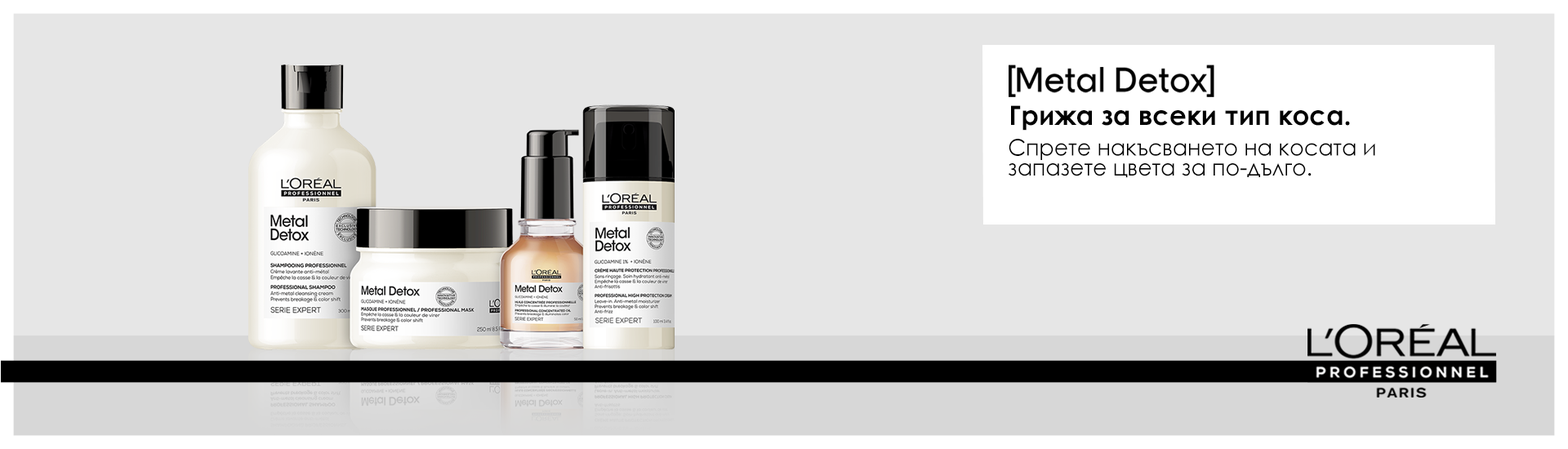
<style>
.page{position:relative;width:1568px;height:449px;background:#e6e6e6}
.page>*{position:absolute;margin:0}
.t1{font:32.9px "LOREAL_PRO-3-Medium";color:#000000;scale:0.97 1}
.t2{font:26.7px "CenturyGothic-Bold";color:#000000}
.t3{font:22.7px/20px "CenturyGothic";color:#000000}
</style>
<div class="page">
<p class="t1" style="left:1017px;top:67px;width:190px;height:26px">Metal Detox</p>
<p class="t2" style="left:1011px;top:105px;width:339px;height:26px">Грижа за всеки тип коса.</p>
<p class="t3" style="left:1009px;top:139px;width:366px;height:39px">Спрете накъсването на косата и запазете цвета за по-дълго.</p>
</div>
